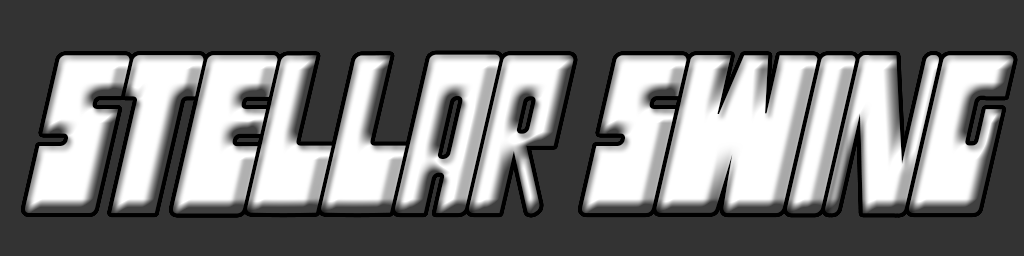
<style>
.page{position:relative;width:1024px;height:256px;background:#333333}
.page>*{position:absolute;margin:0}
.t1{font:200px "SSGrogy-CondensedBoldItalic"}
</style>
<div class="page">
<p class="t1" style="left:25px;top:54px;width:989px;height:160px">Stellar Swing</p>
</div>
